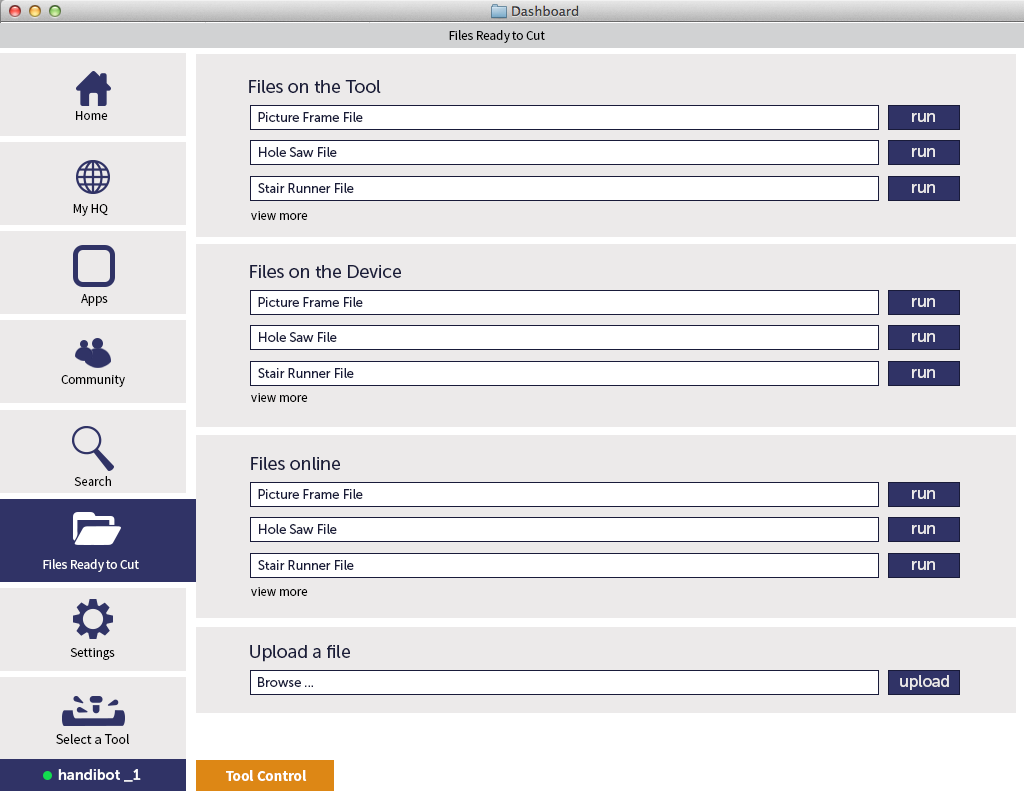
<style>
.page{position:relative;width:1024px;height:791px;background:#eceaea}
.page>*{position:absolute;margin:0}
.t1{font:13px "SourceSansPro-Regular";color:#000000}
.t2{font:18px "MuseoSans-500";letter-spacing:-0.01em;color:#191c39}
.t3{font:13px "MuseoSans-500";letter-spacing:-0.01em;color:#191c39}
.t4{font:16px "MuseoSans-500";letter-spacing:-0.01em;color:#eceaea}
.t5{font:13px "SourceSansPro-Regular";color:#ffffff}
.t6{font:14px "SourceSansPro-Regular";color:#000000}
.t7{font:15px "MuseoSans-700";letter-spacing:-0.01em;color:#ffffff}
.t8{font:15px "SourceSansPro-Bold";color:#ffffff}
</style>
<div class="page">
<p class="t1" style="left:449px;top:30px;width:96px;height:13px">Files Ready to Cut</p>
<p class="t2" style="left:249px;top:80px;width:132px;height:13px">Files on the Tool</p>
<p class="t1" style="left:76px;top:111px;width:32px;height:9px">Home</p>
<p class="t3" style="left:258px;top:112px;width:105px;height:10px">Picture Frame File</p>
<p class="t4" style="left:912px;top:113px;width:23px;height:9px">run</p>
<p class="t3" style="left:259px;top:147px;width:78px;height:10px">Hole Saw File</p>
<p class="t4" style="left:912px;top:148px;width:23px;height:9px">run</p>
<p class="t3" style="left:258px;top:183px;width:96px;height:10px">Stair Runner File</p>
<p class="t4" style="left:912px;top:184px;width:23px;height:9px">run</p>
<p class="t1" style="left:73px;top:204px;width:35px;height:12px">My HQ</p>
<p class="t1" style="left:251px;top:211px;width:57px;height:9px">view more</p>
<p class="t2" style="left:250px;top:265px;width:151px;height:13px">Files on the Device</p>
<p class="t1" style="left:81px;top:294px;width:27px;height:12px">Apps</p>
<p class="t3" style="left:258px;top:297px;width:105px;height:10px">Picture Frame File</p>
<p class="t4" style="left:912px;top:298px;width:23px;height:9px">run</p>
<p class="t3" style="left:259px;top:332px;width:78px;height:10px">Hole Saw File</p>
<p class="t4" style="left:912px;top:333px;width:23px;height:9px">run</p>
<p class="t1" style="left:61px;top:375px;width:64px;height:12px">Community</p>
<p class="t3" style="left:258px;top:368px;width:96px;height:10px">Stair Runner File</p>
<p class="t4" style="left:912px;top:369px;width:23px;height:9px">run</p>
<p class="t1" style="left:251px;top:393px;width:57px;height:9px">view more</p>
<p class="t2" style="left:251px;top:457px;width:89px;height:13px">Files online</p>
<p class="t1" style="left:74px;top:476px;width:37px;height:10px">Search</p>
<p class="t3" style="left:258px;top:489px;width:105px;height:10px">Picture Frame File</p>
<p class="t4" style="left:912px;top:490px;width:23px;height:9px">run</p>
<p class="t3" style="left:259px;top:524px;width:78px;height:10px">Hole Saw File</p>
<p class="t4" style="left:912px;top:525px;width:23px;height:9px">run</p>
<p class="t5" style="left:43px;top:559px;width:96px;height:13px">Files Ready to Cut</p>
<p class="t3" style="left:258px;top:560px;width:96px;height:10px">Stair Runner File</p>
<p class="t4" style="left:912px;top:561px;width:23px;height:9px">run</p>
<p class="t1" style="left:251px;top:587px;width:57px;height:9px">view more</p>
<p class="t1" style="left:70px;top:648px;width:45px;height:12px">Settings</p>
<p class="t2" style="left:250px;top:645px;width:100px;height:17px">Upload a file</p>
<p class="t3" style="left:258px;top:677px;width:55px;height:10px">Browse ...</p>
<p class="t4" style="left:900px;top:675px;width:49px;height:15px">upload</p>
<p class="t6" style="left:56px;top:734px;width:73px;height:10px">Select a Tool</p>
<p class="t7" style="left:58px;top:769px;width:83px;height:13px">handibot _1</p>
<p class="t8" style="left:226px;top:770px;width:81px;height:11px">Tool Control</p>
</div>
